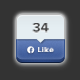
<style>
.page{position:relative;width:80px;height:80px;background:#333333}
.page>*{position:absolute;margin:0}
.t1{font:13.5px "ProximaNova-Bold";color:#444444}
.t2{font:8.6px "ProximaNova-Bold";color:#ffffff}
</style>
<div class="page">
<p class="t1" style="left:32px;top:23px;width:17px;height:10px">34</p>
<p class="t2" style="left:38px;top:47px;width:16px;height:5px">Like</p>
</div>
